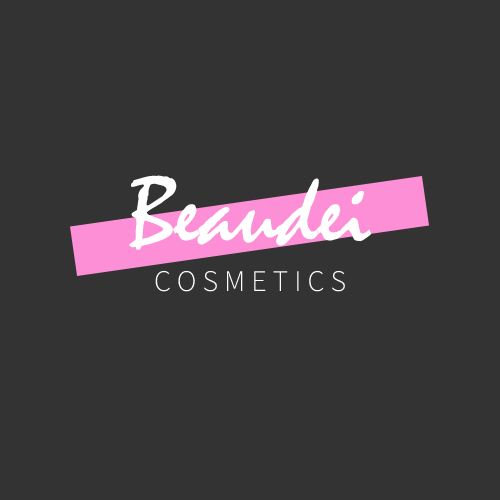
<style>
.page{position:relative;width:500px;height:500px;background:#333333}
.page>*{position:absolute;margin:0}
.t1{font:100px "Mistral";color:#ffffff}
.t2{font:30px "SourceSansRoman-Light";color:#fefefe}
</style>
<div class="page">
<p class="t1" style="left:129px;top:175px;width:243px;height:75px">Beaudei</p>
<p class="t2" style="left:155px;top:270px;width:190px;height:22px">C O S M E T I C S</p>
</div>
